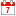
<style>
.page{position:relative;width:16px;height:16px;background:#ffffff}
.page>*{position:absolute;margin:0}
.t1{font:7.6px "Arial-BoldMT";color:#e11d12;scale:0.95 1}
</style>
<div class="page">
<p class="t1" style="left:6px;top:7px;width:4px;height:6px">7</p>
</div>
